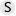
<style>
.page{position:relative;width:16px;height:16px;background:#e6e6e6}
.page>*{position:absolute;margin:0}
.t1{font:14px "KhmerUI";color:#050505}
</style>
<div class="page">
<p class="t1" style="left:4px;top:2px;width:7px;height:10px">S</p>
</div>
